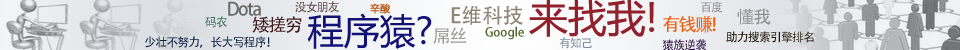
<style>
.page{position:relative;width:960px;height:50px}
.page>*{position:absolute;margin:0}
.t1{font:18px "AdobeHeitiStd-Regular";letter-spacing:-0.08em;color:#6a6966}
.t2{font:12px "AdobeHeitiStd-Regular";letter-spacing:-0.08em;color:#614c4d}
.t3{font:10px "MicrosoftYaHei";color:#b5510f}
.t4{font:20.9px "AdobeHeitiStd-Regular";color:#908677}
.t5{font:38.9px "MicrosoftYaHei";color:#92202d}
.t6{font:12px "AdobeHeitiStd-Regular";letter-spacing:-0.08em;color:#908b97}
.t7{font:12px "AdobeHeitiStd-Regular";letter-spacing:-0.08em;color:#46745e}
.t8{font:18px "AdobeHeitiStd-Regular";letter-spacing:-0.08em;color:#401e1e}
.t9{font:36px "MicrosoftYaHei";color:#121276}
.t10{font:18px "AdobeHeitiStd-Regular";letter-spacing:-0.08em;color:#ef5c0b}
.t11{font:18px "AdobeHeitiStd-Regular";letter-spacing:-0.08em;color:#8e8f8d}
.t12{font:18px "AdobeHeitiStd-Regular";letter-spacing:-0.08em;color:#9b9a92}
.t13{font:12px "AdobeHeitiStd-Regular";color:#4d662d}
.t14{font:12px "AdobeHeitiStd-Regular";letter-spacing:-0.08em;color:#11243f}
.t15{font:12px "AdobeHeitiStd-Regular";letter-spacing:-0.08em;color:#7e8ca2}
.t16{font:12px "AdobeHeitiStd-Regular";letter-spacing:-0.08em;color:#2c0b3f}
.t17{font:12px "AdobeHeitiStd-Regular";letter-spacing:-0.08em;color:#1f1304}
</style>
<div class="page">
<p class="t1" style="left:228px;top:1px;width:33px;height:15px">Dota</p>
<p class="t2" style="left:295px;top:1px;width:44px;height:12px">没女朋友</p>
<p class="t3" style="left:370px;top:3px;width:20px;height:11px">辛酸</p>
<p class="t4" style="left:451px;top:5px;width:72px;height:20px">E维科技</p>
<p class="t5" style="left:529px;top:0px;width:126px;height:37px">来找我!</p>
<p class="t6" style="left:701px;top:1px;width:22px;height:12px">百度</p>
<p class="t7" style="left:205px;top:16px;width:22px;height:12px">码农</p>
<p class="t8" style="left:252px;top:16px;width:50px;height:17px">矮搓穷</p>
<p class="t9" style="left:307px;top:13px;width:125px;height:36px">程序猿?</p>
<p class="t10" style="left:663px;top:15px;width:53px;height:18px">有钱赚!</p>
<p class="t11" style="left:737px;top:8px;width:34px;height:17px">懂我</p>
<p class="t12" style="left:433px;top:27px;width:33px;height:17px">屌丝</p>
<p class="t13" style="left:485px;top:26px;width:39px;height:14px">Google</p>
<p class="t14" style="left:145px;top:36px;width:125px;height:12px">少壮不努力，长大写程序！</p>
<p class="t15" style="left:559px;top:37px;width:33px;height:12px">有知己</p>
<p class="t16" style="left:662px;top:39px;width:44px;height:12px">猿族逆袭</p>
<p class="t17" style="left:726px;top:31px;width:88px;height:12px">助力搜索引擎排名</p>
</div>
